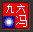
<style>
.page{position:relative;width:33px;height:32px;background:#f20000}
.page>*{position:absolute;margin:0}
.t1{font:10.4px "SimSun";color:#ffffff}
.t2{font:11.7px "SimSun";color:#ffffff}
</style>
<div class="page">
<p class="t1" style="left:6px;top:4px;width:19px;height:9px">九六</p>
<p class="t2" style="left:16px;top:15px;width:11px;height:12px">冯</p>
</div>
